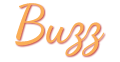
<style>
.page{position:relative;width:120px;height:62px;background:#ffffff}
.page>*{position:absolute;margin:0}
.t1{font:52.3px "DancingScript";color:#faae57}
</style>
<div class="page">
<p class="t1" style="left:15px;top:3px;width:89px;height:53px">Buzz</p>
</div>
